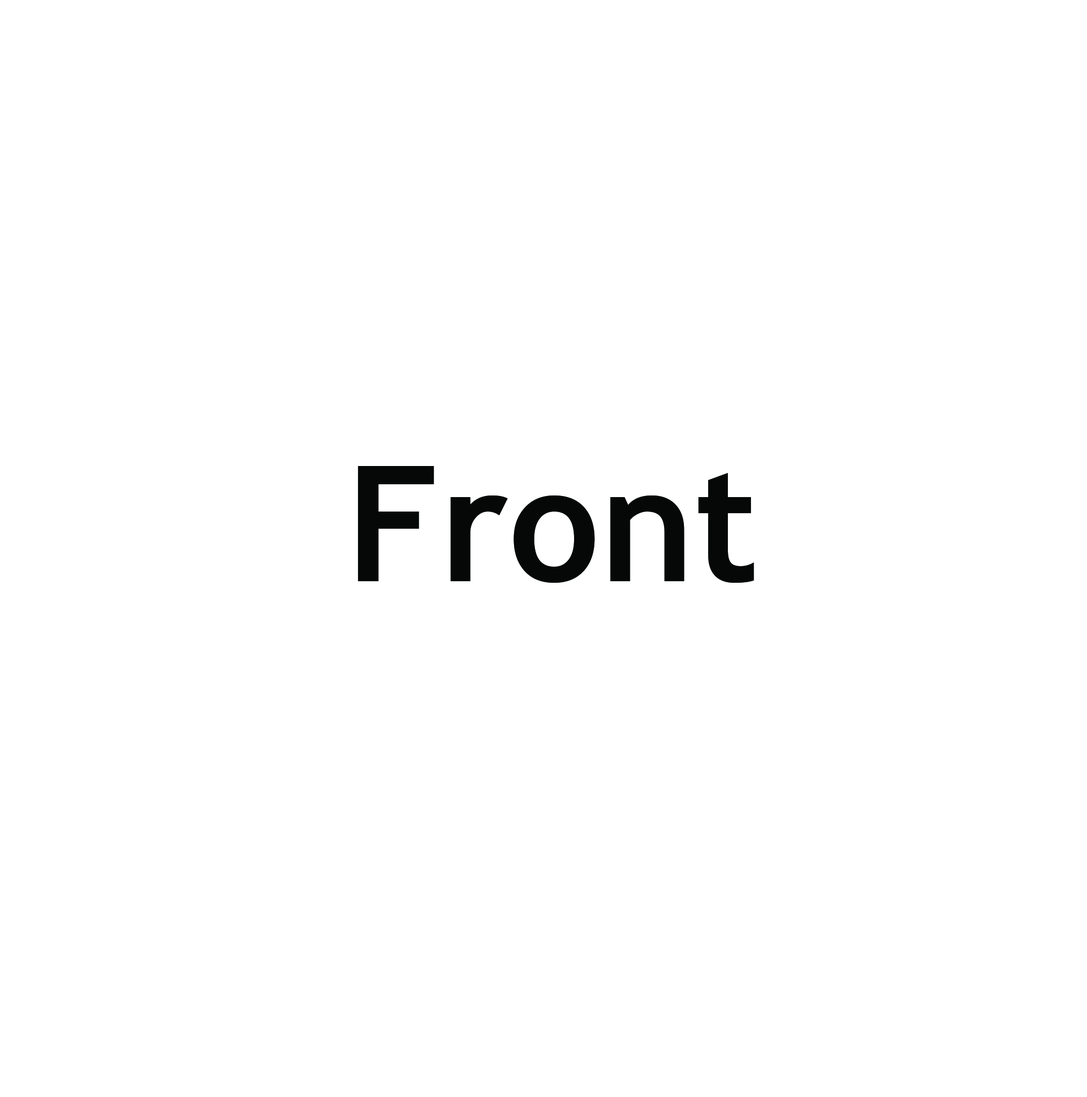
<style>
.page{position:relative;width:1087px;height:1097px;background:#ffffff}
.page>*{position:absolute;margin:0}
.t1{font:160.7px "TrebuchetMS-Bold";color:#060808}
</style>
<div class="page">
<p class="t1" style="left:357px;top:466px;width:397px;height:117px">Front</p>
</div>
